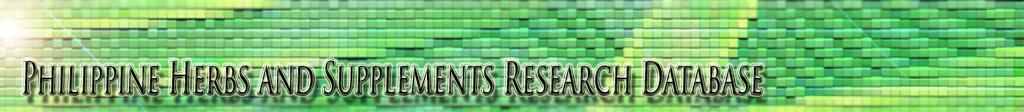
<style>
.page{position:relative;width:1024px;height:112px}
.page>*{position:absolute;margin:0}
.t1{font:43px "TrajanPro-Regular";color:#000000;scale:0.58 1}
</style>
<div class="page">
<p class="t1" style="left:23px;top:60px;width:739px;height:34px">Philippine Herbs and Supplements Research Database</p>
</div>
